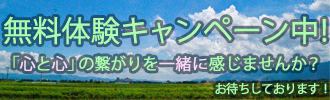
<style>
.page{position:relative;width:330px;height:100px}
.page>*{position:absolute;margin:0}
.t1{font:29px "KozGoPr6N-Regular";letter-spacing:-0.03em;color:#adffaf;font-weight:bold}
.t2{font:16px "KozGoPr6N-Regular";letter-spacing:-0.03em;color:#adffaf;font-weight:bold}
.t3{font:16px "KozGoPr6N-Regular";letter-spacing:-0.03em;color:#a3f3ac;font-weight:bold}
.t4{font:16px "KozGoPr6N-Regular";letter-spacing:-0.03em;color:#ffd6f8;font-weight:bold}
.t5{font:12px "KozGoPr6N-Regular";letter-spacing:-0.03em;color:#adffaf;font-weight:bold}
</style>
<div class="page">
<p class="t1" style="left:4px;top:16px;width:323px;height:29px">無料体験キャンペーン中！</p>
<p class="t2" style="left:13px;top:55px;width:305px;height:17px"><span class="t3">「</span><span class="t4">心</span>と<span class="t4">心</span><span class="t3">」</span>の繋がりを<span class="t4">一緒に</span>感じませんか？</p>
<p class="t5" style="left:215px;top:82px;width:112px;height:13px">お待ちしております！</p>
</div>
